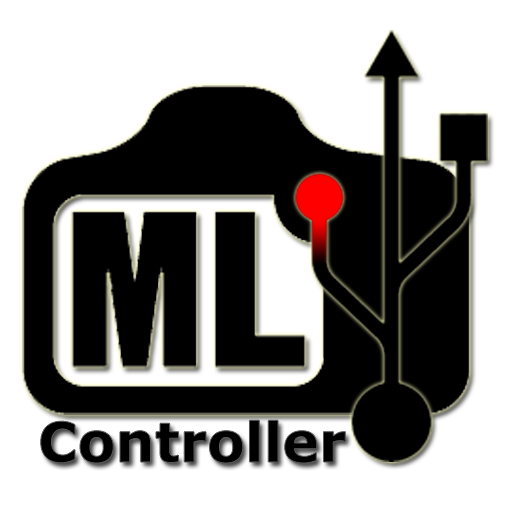
<style>
.page{position:relative;width:512px;height:512px;background:#ffffff}
.page>*{position:absolute;margin:0}
.t1{font:55px "Verdana-Bold";color:#000000}
</style>
<div class="page">
<p class="t1" style="left:40px;top:420px;width:306px;height:43px">Controller</p>
</div>
